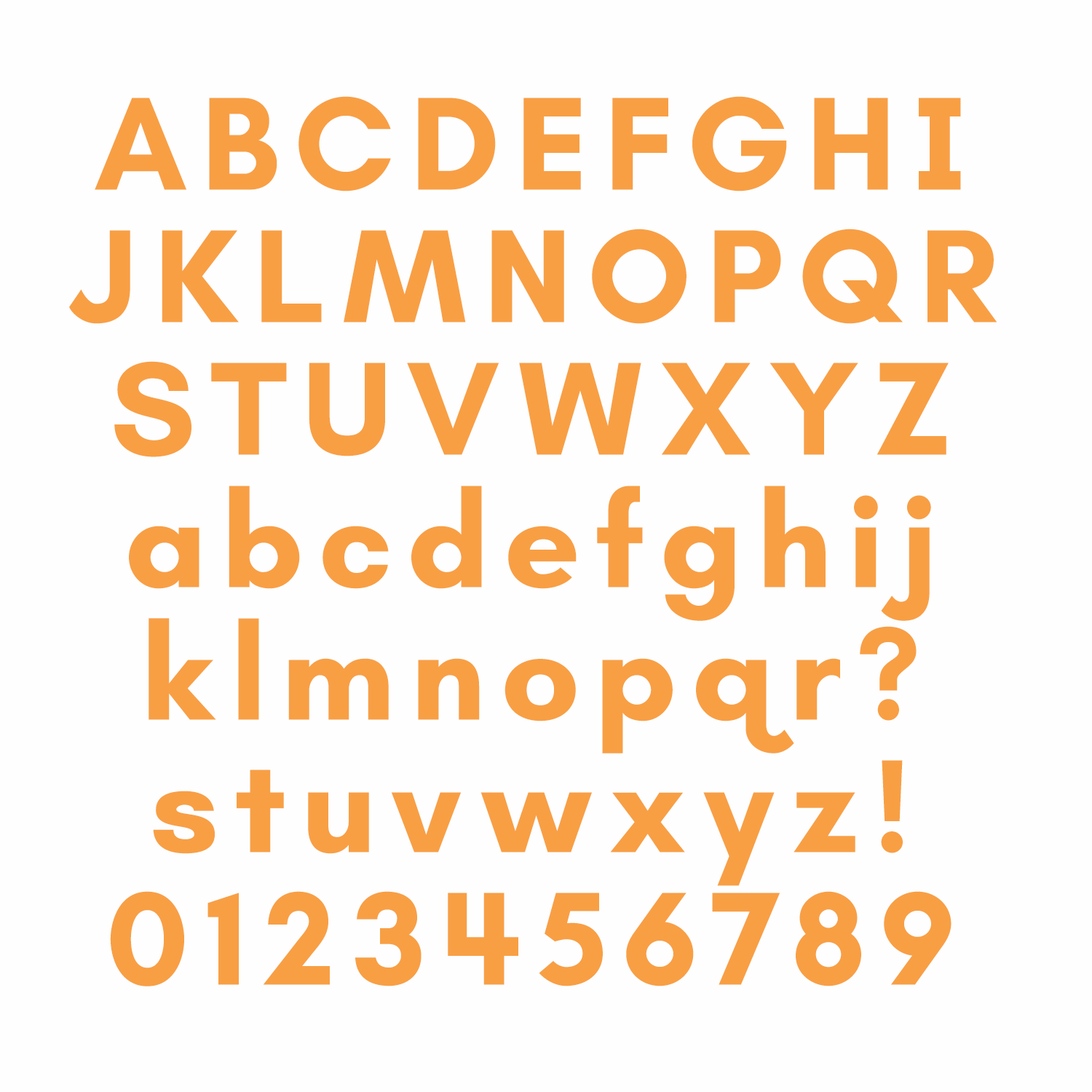
<style>
.page{position:relative;width:1092px;height:1092px;background:#fefefe}
.page>*{position:absolute;margin:0}
.t1{font:134.7px/132.5px "Teachers-Bold";letter-spacing:0.12em;color:#f89f44}
</style>
<div class="page">
<p class="t1" style="left:69px;top:96px;width:928px;height:890px;text-align:center">ABCDEFGHI<br>JKLMNOPQR<br>STUVWXYZ<br>abcdefghij<br>klmnopqr?<br>stuvwxyz!<br>0123456789</p>
</div>
